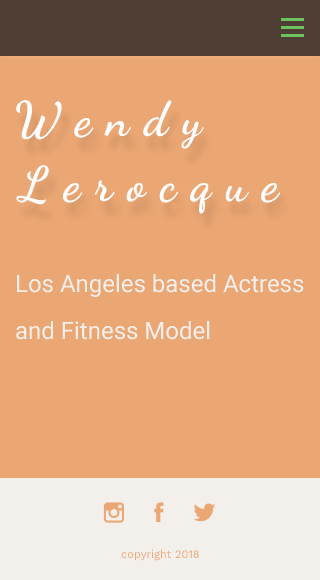
<style>
.page{position:relative;width:320px;height:580px;background:#eaa673}
.page>*{position:absolute;margin:0}
.t1{font:48px "DancingScript-Bold";letter-spacing:0.025em;color:#ffffff}
.t2{font:24px "Roboto-Regular";color:#f3efeb}
.t3{font:11px "WorkSans-Regular";color:#eaa673}
</style>
<div class="page">
<p class="t1" style="left:16px;top:100px;width:188px;height:49px">W e n d y</p>
<p class="t1" style="left:16px;top:165px;width:265px;height:49px">L e r o c q u e</p>
<p class="t2" style="left:17px;top:274px;width:287px;height:23px">Los Angeles based Actress</p>
<p class="t2" style="left:16px;top:321px;width:194px;height:19px">and Fitness Model</p>
<p class="t3" style="left:121px;top:549px;width:78px;height:12px">copyright 2018</p>
</div>
